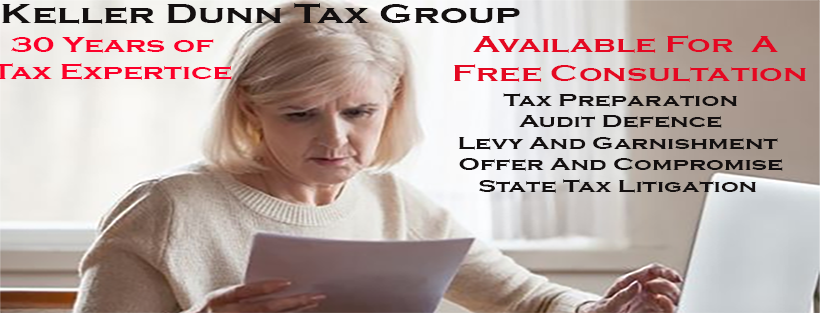
<style>
.page{position:relative;width:820px;height:313px}
.page>*{position:absolute;margin:0}
.t1{font:28.3px "CopperplateGothic-Bold";color:#141010;scale:1.39 1}
.t2{font:24px "CopperplateGothic-Bold";color:#e40822;scale:1.39 1}
.t3{font:18px "CopperplateGothic-Bold";color:#141010;scale:1.39 1}
</style>
<div class="page">
<p class="t1" style="left:2px;top:3px;width:518px;height:21px">Keller Dunn Tax Group</p>
<p class="t2" style="left:454px;top:35px;width:352px;height:47px;text-align:center">Available For  A <br>Free Consultation</p>
<p class="t3" style="left:459px;top:93px;width:324px;height:100px;text-align:center">Tax Preparation<br>Audit Defence<br>Levy And Garnishment <br>Offer And Compromise<br>State Tax Litigation</p>
</div>
